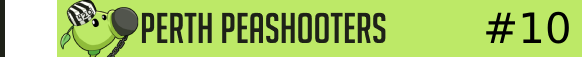
<style>
.page{position:relative;width:582px;height:57px;background:#bde967}
.page>*{position:absolute;margin:0}
.t1{font:42px "BigNoodleTitling";color:#1e2118}
.t2{font:42px "BigNoodleTitling";color:#000000}
</style>
<div class="page">
<p class="t1" style="left:141px;top:12px;width:245px;height:31px">Perth Peashooters</p>
<p class="t2" style="left:486px;top:11px;width:83px;height:33px">#10</p>
</div>
